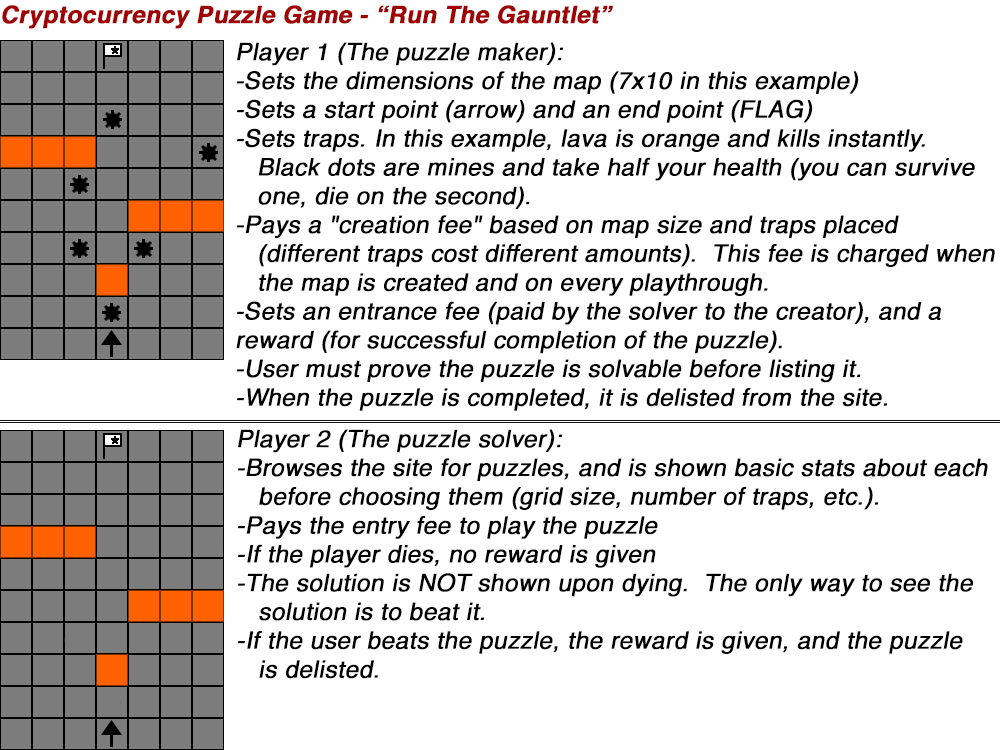
<style>
.page{position:relative;width:1000px;height:750px;background:#ffffff}
.page>*{position:absolute;margin:0}
.t1{font:24px "Helvetica-Bold";color:#a00303;font-weight:bold;font-style:italic}
.t2{font:24px "Helvetica";color:#000000;font-weight:bold;font-style:italic}
</style>
<div class="page">
<p class="t1" style="left:2px;top:5px;width:611px;height:24px">Cryptocurrency Puzzle Game - “Run The Gauntlet”</p>
<p class="t2" style="left:236px;top:42px;width:759px;height:369px">Player 1 (The puzzle maker):<br>-Sets the dimensions of the map (7x10 in this example)<br>-Sets a start point (arrow) and an end point (FLAG)<br>-Sets traps. In this example, lava is orange and kills instantly. <br>   Black dots are mines and take half your health (you can survive <br>   one, die on the second).<br>-Pays a "creation fee" based on map size and traps placed <br>   (different traps cost different amounts).  This fee is charged when<br>   the map is created and on every playthrough.<br>-Sets an entrance fee (paid by the solver to the creator), and a <br>reward (for successful completion of the puzzle).<br>-User must prove the puzzle is solvable before listing it.<br>-When the puzzle is completed, it is delisted from the site.</p>
<p class="t2" style="left:238px;top:429px;width:750px;height:250px">Player 2 (The puzzle solver):<br>-Browses the site for puzzles, and is shown basic stats about each<br>   before choosing them (grid size, number of traps, etc.).<br>-Pays the entry fee to play the puzzle<br>-If the player dies, no reward is given<br>-The solution is NOT shown upon dying.  The only way to see the<br>   solution is to beat it.<br>-If the user beats the puzzle, the reward is given, and the puzzle<br>   is delisted.</p>
</div>
